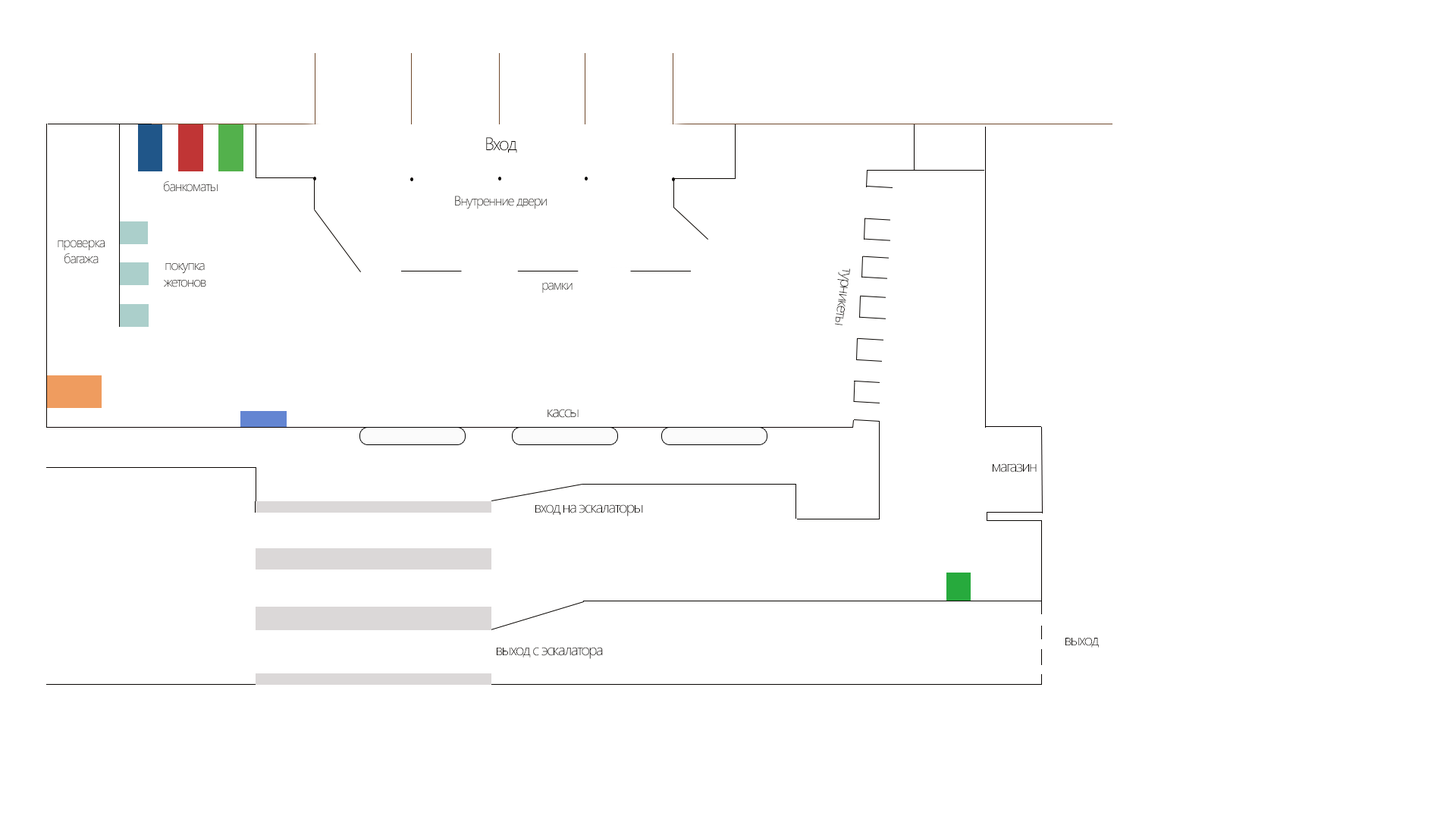
<style>
.page{position:relative;width:1456px;height:819px;background:#ffffff}
.page>*{position:absolute;margin:0}
.t1{font:18.3px "SegoeUI-Light";letter-spacing:-0.075em;color:#090400}
.t2{font:13.5px "SegoeUI-Light";letter-spacing:-0.075em}
.t3{font:13.6px "SegoeUI-Light";letter-spacing:-0.075em;color:#090400}
.t4{font:13.5px "SegoeUI-Light";letter-spacing:-0.075em;color:#060300}
.t5{font:15.2px "SegoeUI-Light";letter-spacing:-0.075em;color:#060300}
.t6{font:15.1px "SegoeUI-Light";letter-spacing:-0.075em;color:#060300}
</style>
<div class="page">
<p class="t1" style="left:486px;top:137px;width:31px;height:16px">Вход</p>
<p class="t2" style="left:164px;top:180px;width:54px;height:12px">банкоматы</p>
<p class="t3" style="left:455px;top:196px;width:92px;height:13px">Внутренние двери</p>
<p class="t4" style="left:58px;top:240px;width:47px;height:24px;text-align:center">проверка <br>багажа</p>
<p class="t2" style="left:164px;top:263px;width:42px;height:24px;text-align:center">покупка жетонов</p>
<p class="t5" style="left:835px;top:268px;width:15px;height:57px;rotate:98deg">турникеты</p>
<p class="t2" style="left:542px;top:282px;width:31px;height:11px">рамки</p>
<p class="t6" style="left:548px;top:409px;width:31px;height:9px">кассы</p>
<p class="t5" style="left:993px;top:463px;width:44px;height:9px">магазин</p>
<p class="t5" style="left:535px;top:504px;width:108px;height:12px">вход на эскалаторы</p>
<p class="t6" style="left:1065px;top:638px;width:34px;height:10px">выход</p>
<p class="t6" style="left:497px;top:647px;width:106px;height:12px">выход с эскалатора</p>
</div>
